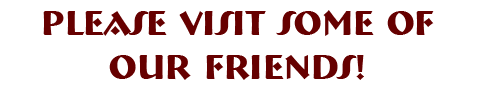
<style>
.page{position:relative;width:480px;height:92px;background:#ffffff}
.page>*{position:absolute;margin:0}
.t1{font:36px "BremenBT-Bold";color:#660000}
</style>
<div class="page">
<p class="t1" style="left:14px;top:5px;width:447px;height:82px;text-align:center">Please visit some of our friends!</p>
</div>
